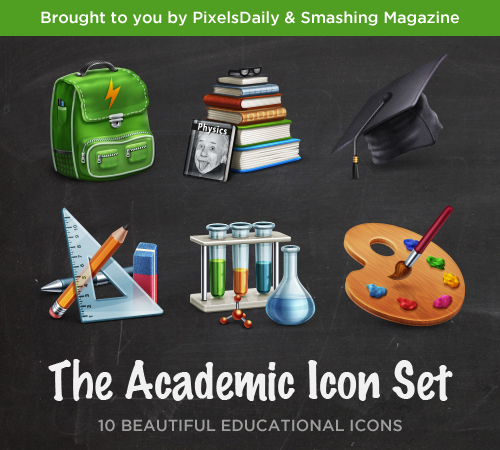
<style>
.page{position:relative;width:500px;height:450px}
.page>*{position:absolute;margin:0}
.t1{font:16px "GothamMedium";color:#ffffff}
.t2{font:48px "MarkerFelt-Thin";color:#f1f1f1}
.t3{font:16px "GothamMedium";color:#9e9e9e}
</style>
<div class="page">
<p class="t1" style="left:41px;top:11px;width:418px;height:15px">Brought to you by PixelsDaily &amp; Smashing Magazine</p>
<p class="t2" style="left:48px;top:359px;width:405px;height:42px">The Academic Icon Set</p>
<p class="t3" style="left:98px;top:419px;width:304px;height:13px">10 BEAUTIFUL EDUCATIONAL ICONS</p>
</div>
